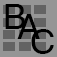
<style>
.page{position:relative;width:57px;height:57px;background:#959595}
.page>*{position:absolute;margin:0}
.t1{font:35px "Helvetica";color:#000000}
</style>
<div class="page">
<p class="t1" style="left:5px;top:4px;width:20px;height:25px">B</p>
<p class="t1" style="left:17px;top:14px;width:23px;height:25px">A</p>
<p class="t1" style="left:31px;top:29px;width:23px;height:25px">C</p>
</div>
